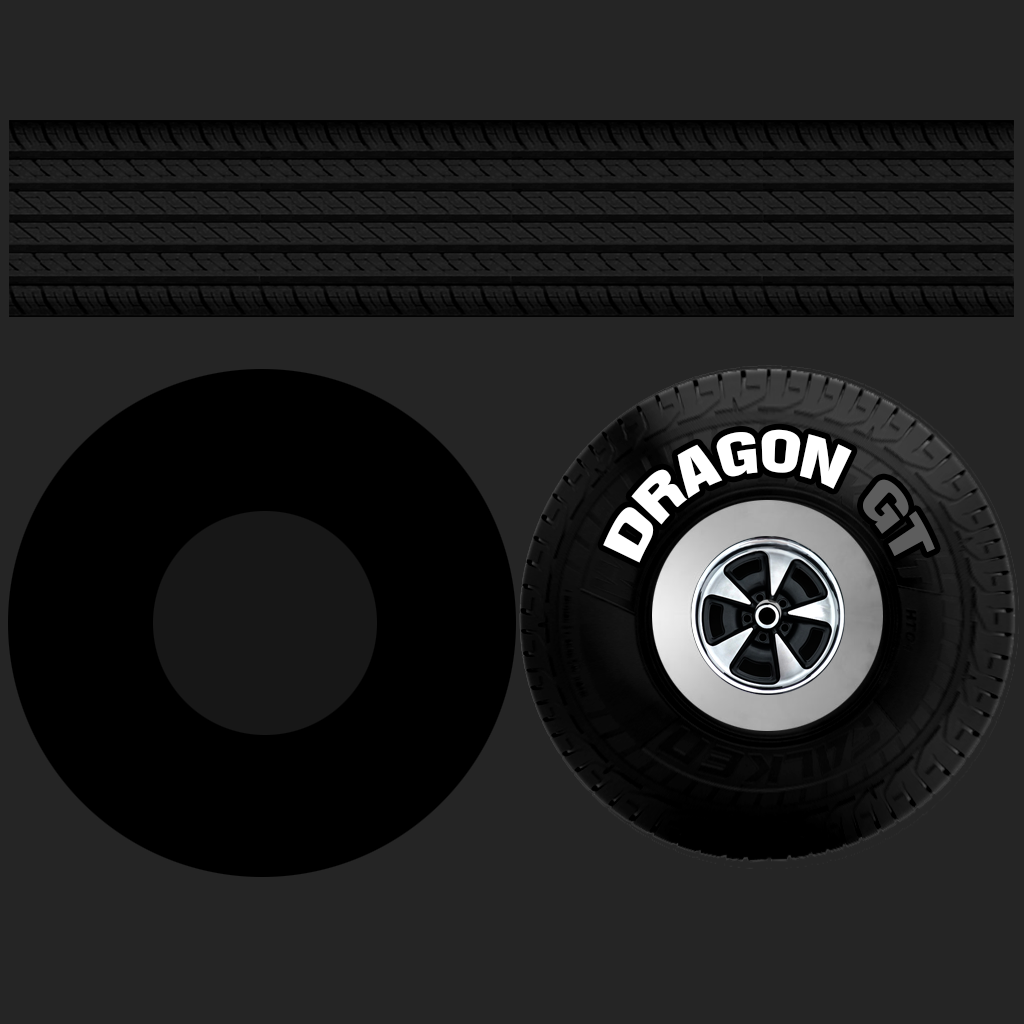
<style>
.page{position:relative;width:1024px;height:1024px;background:#252525}
.page>*{position:absolute;margin:0}
.t1{font:75.2px "Swiss921BT-RegularA";color:#ffffff;font-variant:small-caps;scale:0.93 1}
.t2{font:75.2px "Swiss921BT-RegularA";color:#5d5d5d;font-variant:small-caps;scale:0.93 1}
</style>
<div class="page">
<p class="t1" style="left:603px;top:429px;width:332px;height:134px">dragon <span class="t2">gt</span></p>
</div>
